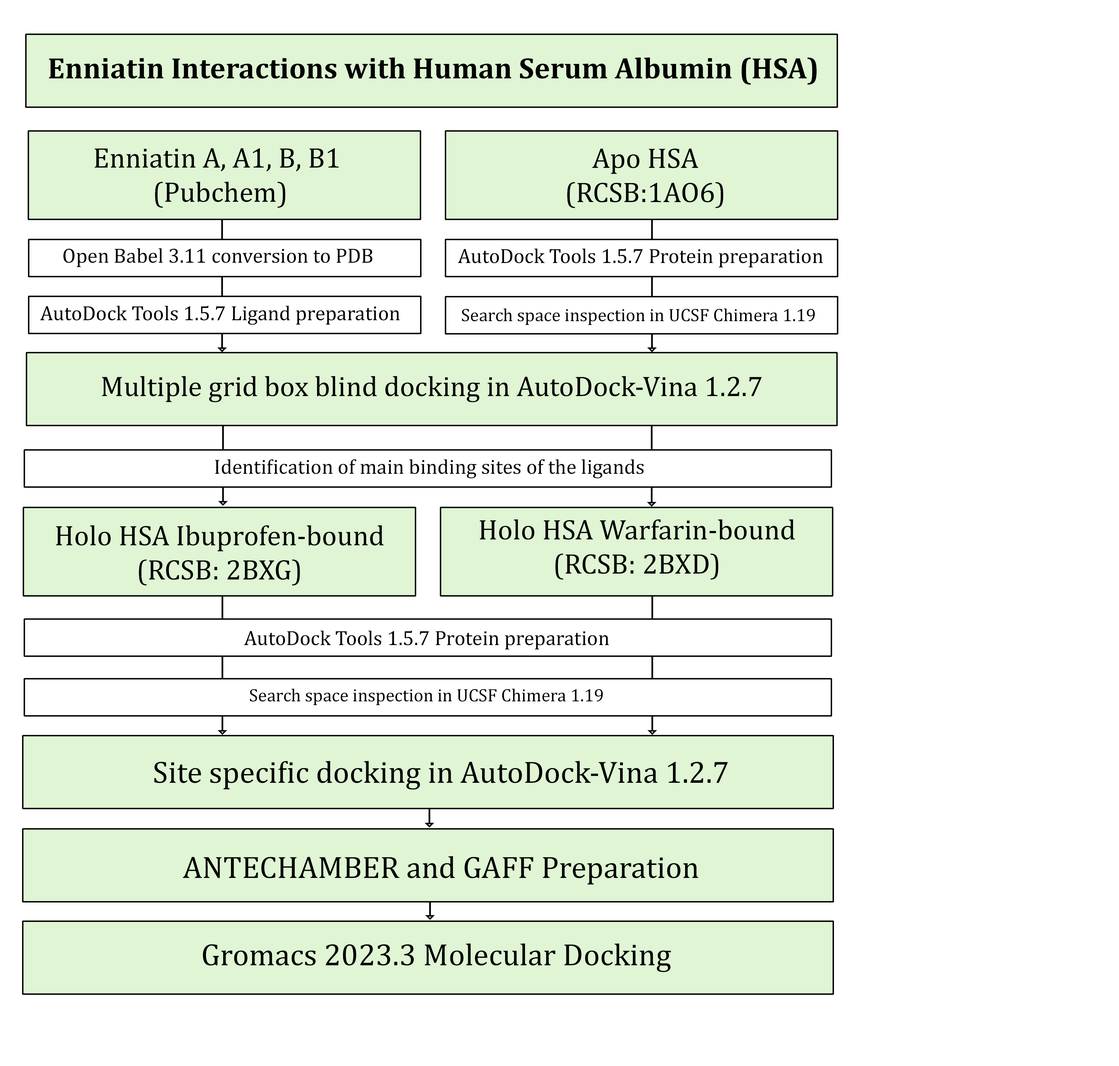
<style>
.page{position:relative;width:1119px;height:1066px;background:#ffffff}
.page>*{position:absolute;margin:0}
.t1{font:29.8px "Cambria-Bold";color:#000000}
.t2{font:28.5px "Cambria";color:#000000}
.t3{font:20.7px "Cambria";color:#000000}
.t4{font:18.1px "Cambria";color:#000000}
.t5{font:31.1px "Cambria";color:#000000}
</style>
<div class="page">
<p class="t1" style="left:49px;top:57px;width:767px;height:28px">Enniatin Interactions with Human Serum Albumin (HSA)</p>
<p class="t2" style="left:94px;top:148px;width:245px;height:60px;text-align:center">Enniatin A, A1, B, B1 <br>(Pubchem)</p>
<p class="t2" style="left:567px;top:149px;width:156px;height:59px;text-align:center">Apo HSA<br>(RCSB:1AO6)</p>
<p class="t3" style="left:63px;top:248px;width:309px;height:19px">Open Babel 3.11 conversion to PDB</p>
<p class="t3" style="left:458px;top:248px;width:365px;height:19px">AutoDock Tools 1.5.7 Protein preparation</p>
<p class="t3" style="left:40px;top:306px;width:360px;height:19px">AutoDock Tools 1.5.7 Ligand preparation</p>
<p class="t4" style="left:462px;top:308px;width:353px;height:17px">Search space inspection in UCSF Chimera 1.19</p>
<p class="t2" style="left:102px;top:376px;width:659px;height:26px">Multiple grid box blind docking in AutoDock-Vina 1.2.7</p>
<p class="t3" style="left:215px;top:459px;width:429px;height:19px">Identification of main binding sites of the ligands</p>
<p class="t2" style="left:480px;top:519px;width:315px;height:61px;text-align:center">Holo HSA Warfarin-bound<br>(RCSB: 2BXD)</p>
<p class="t2" style="left:56px;top:525px;width:328px;height:61px;text-align:center">Holo HSA Ibuprofen-bound<br>(RCSB: 2BXG)</p>
<p class="t3" style="left:244px;top:630px;width:365px;height:19px">AutoDock Tools 1.5.7 Protein preparation</p>
<p class="t4" style="left:250px;top:688px;width:353px;height:17px">Search space inspection in UCSF Chimera 1.19</p>
<p class="t5" style="left:154px;top:761px;width:574px;height:28px">Site specific docking in AutoDock-Vina 1.2.7</p>
<p class="t5" style="left:183px;top:856px;width:515px;height:28px">ANTECHAMBER and GAFF Preparation</p>
<p class="t5" style="left:203px;top:943px;width:468px;height:29px">Gromacs 2023.3 Molecular Docking</p>
</div>
